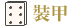
<style>
.page{position:relative;width:69px;height:27px;background:#ffffff}
.page>*{position:absolute;margin:0}
.t1{font:18px "RyuminPro-Heavy";color:#ae9442}
</style>
<div class="page">
<p class="t1" style="left:33px;top:4px;width:34px;height:18px">裝甲</p>
</div>
